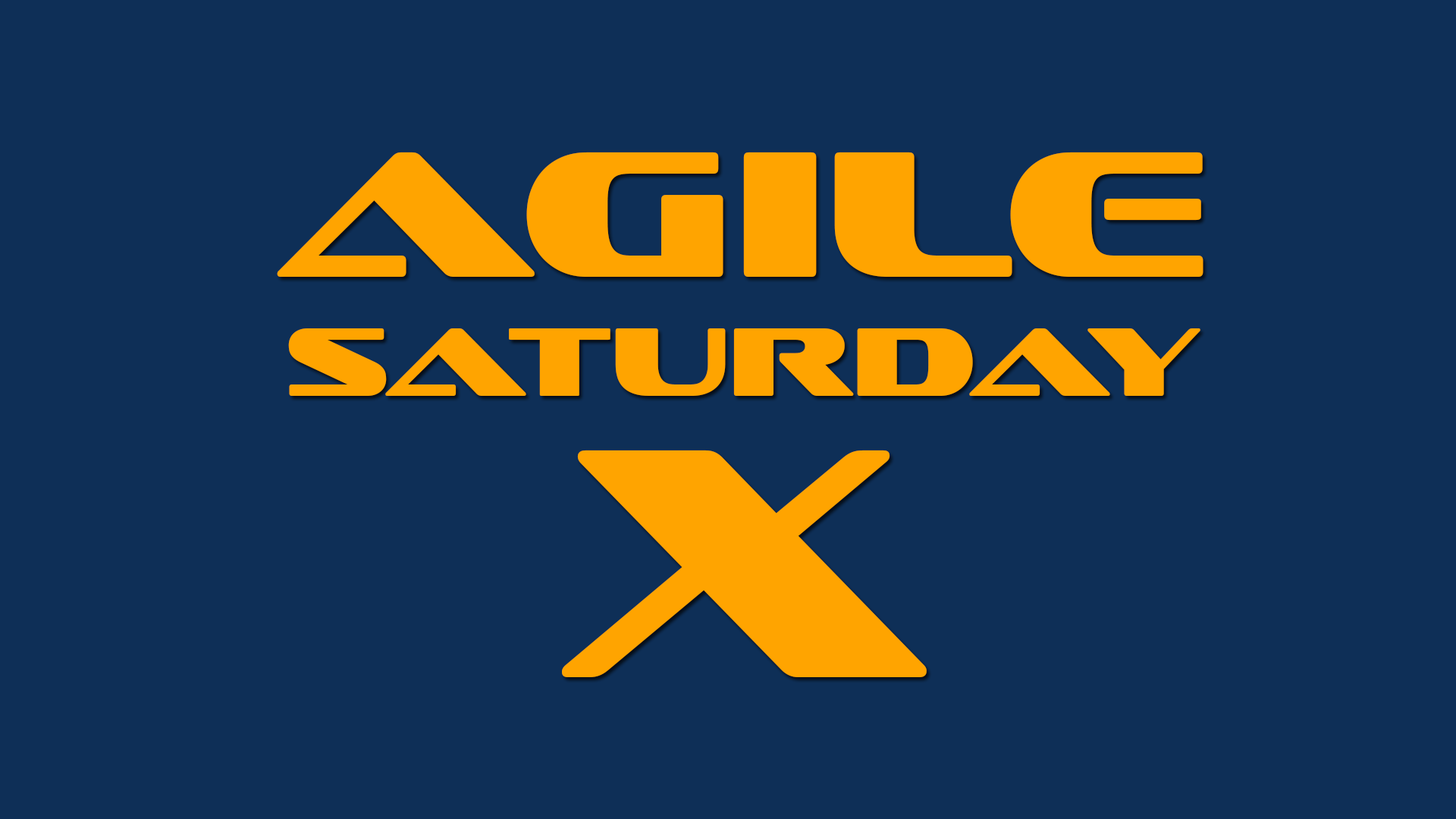
<style>
.page{position:relative;width:1456px;height:819px;background:#0e2f57}
.page>*{position:absolute;margin:0}
.t1{font:23.8px "SofachromeRg-Regular";color:#ffa400}
.t2{font:181.7px "SofachromeRg-Regular";color:#ffa400}
.t3{font:332.5px "SofachromeRg-Regular";color:#ffa400;scale:0.87 1}
</style>
<div class="page">
<p class="t1" style="left:277px;top:152px;width:926px;height:525px;text-align:center"><span class="t2">Agile<br></span>SaturDay<br><span class="t3">X</span></p>
</div>
